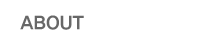
<style>
.page{position:relative;width:200px;height:44px;background:#ffffff}
.page>*{position:absolute;margin:0}
.t1{font:18px "YDIYGO350";color:#676767}
</style>
<div class="page">
<p class="t1" style="left:20px;top:15px;width:64px;height:15px">ABOUT</p>
</div>
